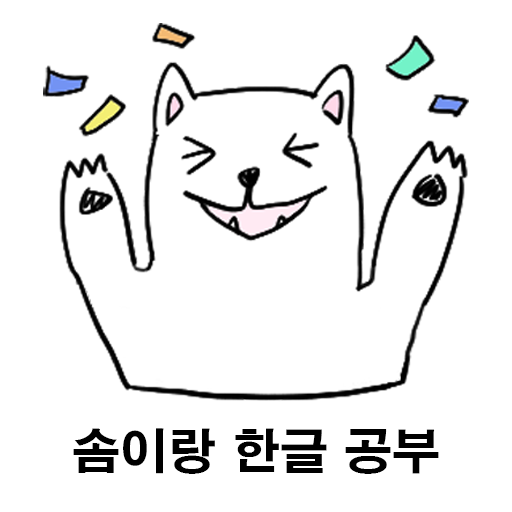
<style>
.page{position:relative;width:512px;height:512px;background:#ffffff}
.page>*{position:absolute;margin:0}
.t1{font:48px "H2gtrE";color:#000000}
</style>
<div class="page">
<p class="t1" style="left:73px;top:428px;width:366px;height:46px">솜이랑 한글 공부</p>
</div>
